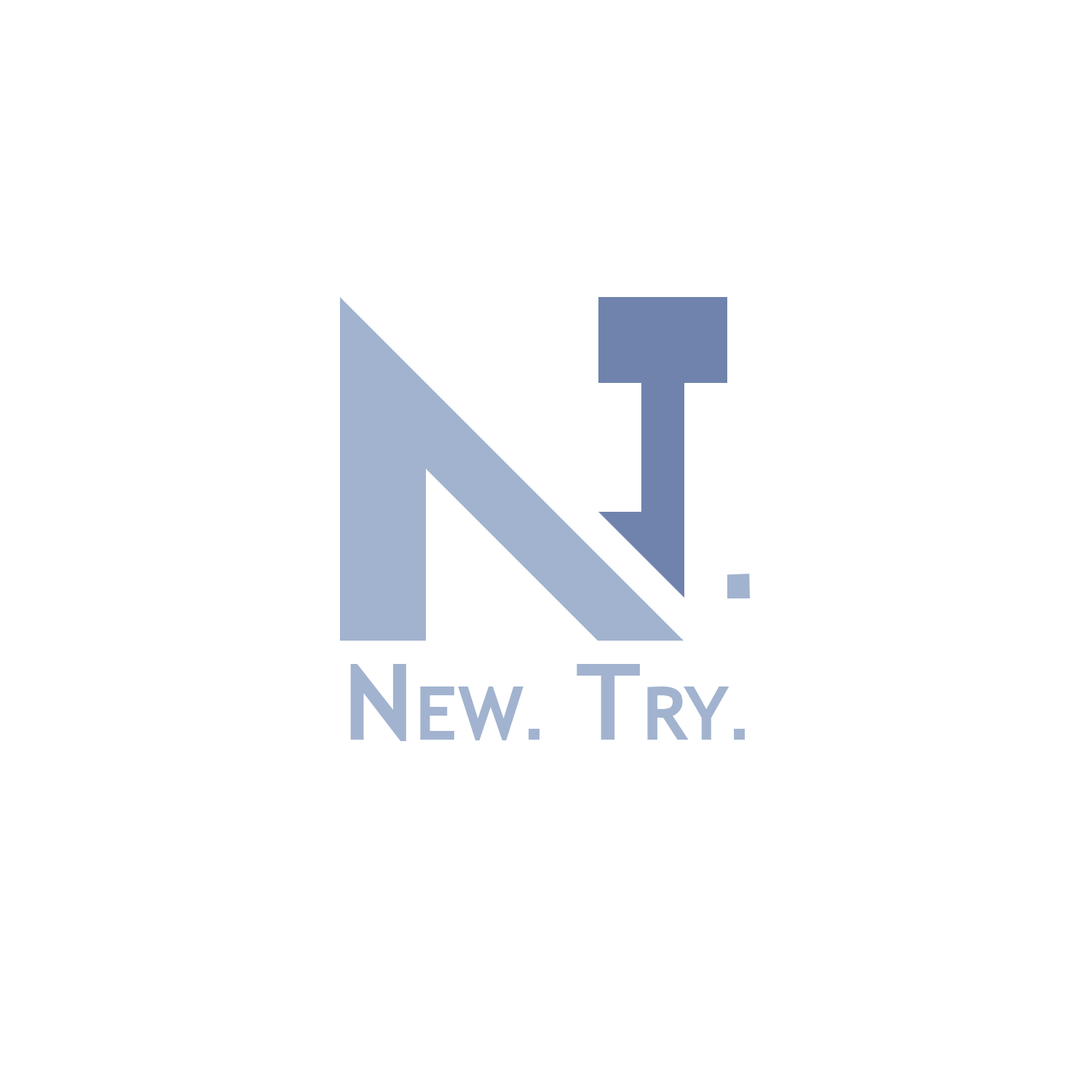
<style>
.page{position:relative;width:1092px;height:1092px;background:#ffffff}
.page>*{position:absolute;margin:0}
.t1{font:106.2px "TrebuchetMS-Bold";letter-spacing:0.01em;color:#a2b3cf;font-variant:small-caps}
.t2{font:106.2px "DINCondensed-Bold";letter-spacing:0.01em;color:#a2b3cf;font-variant:small-caps}
</style>
<div class="page">
<p class="t1" style="left:350px;top:664px;width:395px;height:77px">New<span class="t2">.</span> Try<span class="t2">.</span></p>
</div>
